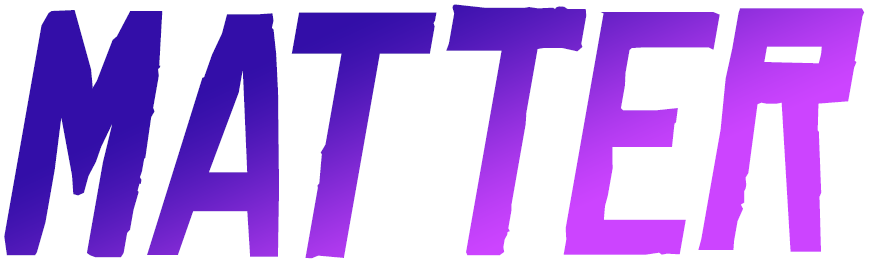
<style>
.page{position:relative;width:869px;height:263px;background:#ffffff}
.page>*{position:absolute;margin:0}
.t1{font:329px "ChineseRocksRg-Regular";font-style:italic}
</style>
<div class="page">
<p class="t1" style="left:4px;top:4px;width:861px;height:255px">MATTER</p>
</div>
